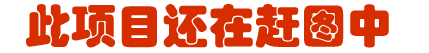
<style>
.page{position:relative;width:429px;height:53px;background:#ffffff}
.page>*{position:absolute;margin:0}
.t1{font:46px "STHupo";color:#d62e00}
</style>
<div class="page">
<p class="t1" style="left:26px;top:4px;width:363px;height:44px">此项目还在赶图中</p>
</div>
